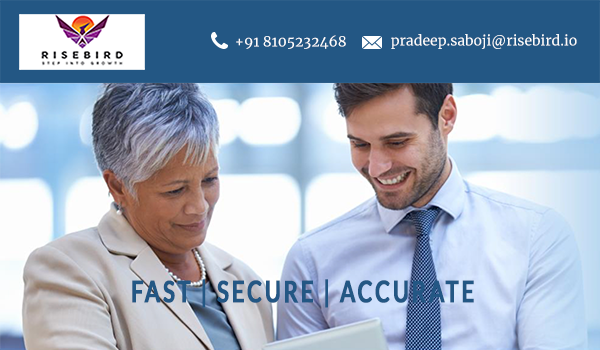
<style>
.page{position:relative;width:600px;height:350px;background:#235784}
.page>*{position:absolute;margin:0}
.t1{font:14px "Merriweather-Regular";color:#fffefe}
.t2{font:14px "Merriweather-Regular";color:#fcfcfc}
.t3{font:29.4px "Lato-Bold";letter-spacing:0.1em;color:#235784;font-weight:bold;scale:0.75 1}
</style>
<div class="page">
<p class="t1" style="left:236px;top:35px;width:110px;height:14px">+91 8105232468</p>
<p class="t2" style="left:391px;top:34px;width:186px;height:15px">pradeep.saboji@risebird.io</p>
<p class="t3" style="left:132px;top:279px;width:342px;height:29px">FAST | SECURE | ACCURATE</p>
</div>
